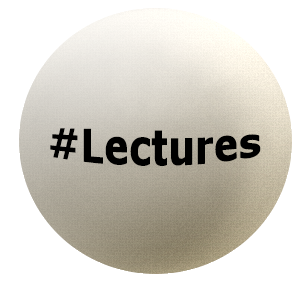
<style>
.page{position:relative;width:306px;height:290px;background:#ffffff}
.page>*{position:absolute;margin:0}
.t1{font:37.5px "Verdana-Bold";color:#000000}
</style>
<div class="page">
<p class="t1" style="left:50px;top:128px;width:211px;height:38px">#Lectures</p>
</div>
